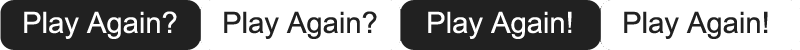
<style>
.page{position:relative;width:800px;height:50px;background:#ffffff}
.page>*{position:absolute;margin:0}
.t1{font:29.2px "ArialMT";color:#212121}
</style>
<div class="page">
<p class="t1" style="left:224px;top:11px;width:153px;height:28px">Play Again?</p>
<p class="t1" style="left:624px;top:11px;width:144px;height:28px">Play Again!</p>
</div>
